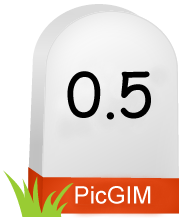
<style>
.page{position:relative;width:187px;height:220px;background:#ffffff}
.page>*{position:absolute;margin:0}
.t1{font:60px "ComicSansMS";color:#000000}
.t2{font:24px "ArialMT";color:#ffffff}
</style>
<div class="page">
<p class="t1" style="left:67px;top:71px;width:84px;height:49px">0.5</p>
<p class="t2" style="left:75px;top:186px;width:76px;height:18px">PicGIM</p>
</div>
